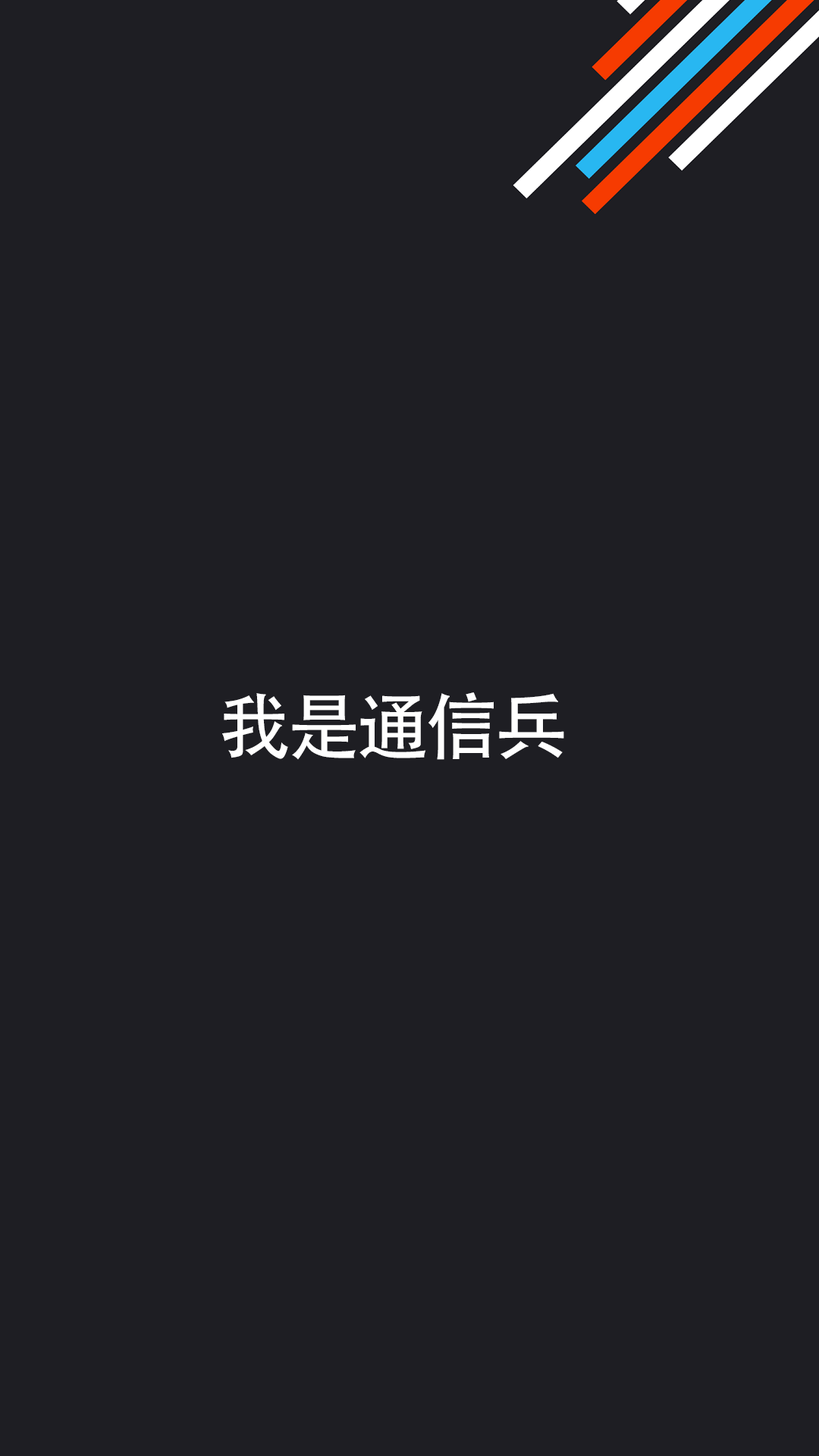
<style>
.page{position:relative;width:819px;height:1456px;background:#1e1e23}
.page>*{position:absolute;margin:0}
.t1{font:72.8px "AdobeHeitiStd-Regular";letter-spacing:-0.05em;color:#ffffff}
</style>
<div class="page">
<p class="t1" style="left:222px;top:692px;width:342px;height:68px">我是通信兵</p>
</div>
